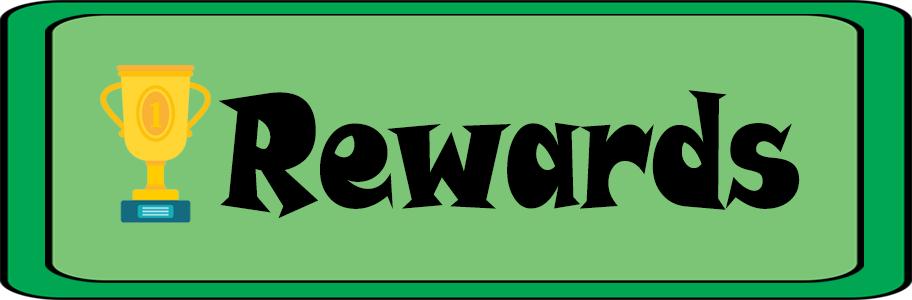
<style>
.page{position:relative;width:912px;height:300px;background:#7cc576}
.page>*{position:absolute;margin:0}
.t1{font:160px "SnapITC-Regular";color:#000000;scale:0.75 1}
</style>
<div class="page">
<p class="t1" style="left:219px;top:90px;width:581px;height:129px">Rewards</p>
</div>
